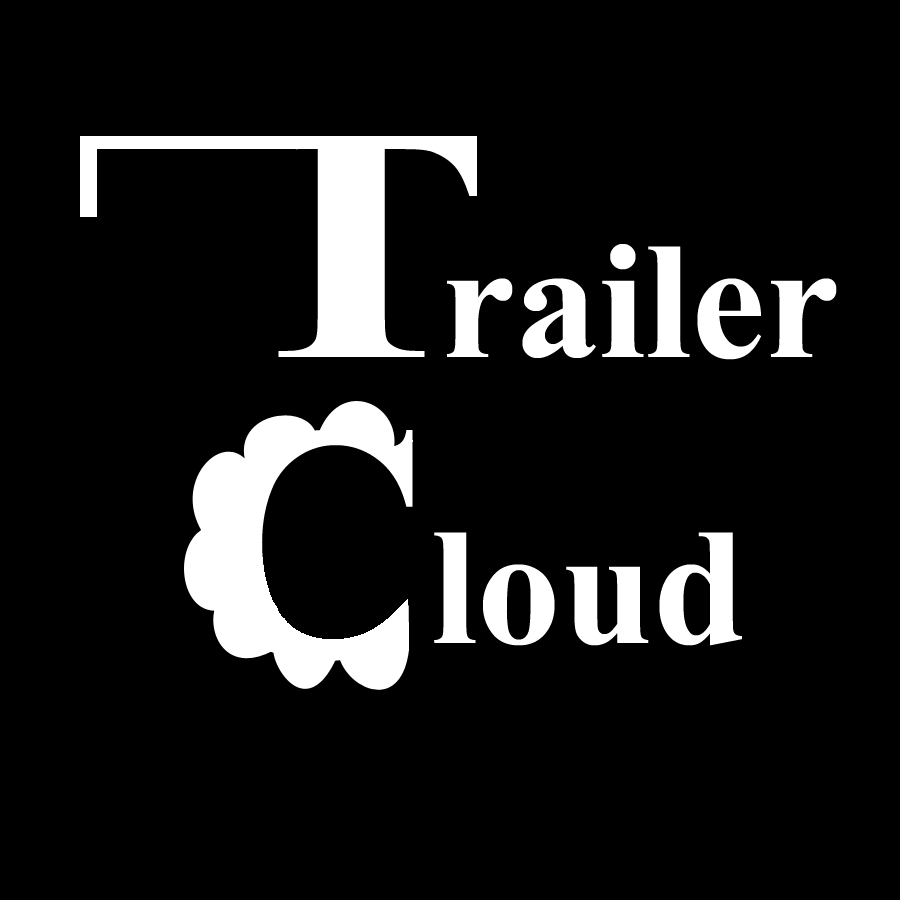
<style>
.page{position:relative;width:900px;height:900px;background:#000000}
.page>*{position:absolute;margin:0}
.t1{font:166.7px "TimesNewRomanPS-BoldMT";color:#ffffff}
</style>
<div class="page">
<p class="t1" style="left:446px;top:244px;width:391px;height:116px">railer</p>
<p class="t1" style="left:434px;top:532px;width:308px;height:114px">loud</p>
</div>
